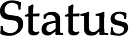
<style>
.page{position:relative;width:129px;height:36px;background:#ffffff}
.page>*{position:absolute;margin:0}
.t1{font:48px "Palatino-Roman";color:#000000}
</style>
<div class="page">
<p class="t1" style="left:0px;top:0px;width:129px;height:36px">Status</p>
</div>
